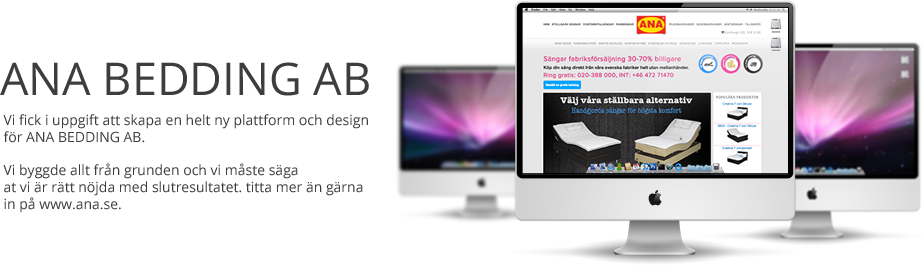
<style>
.page{position:relative;width:924px;height:265px;background:#ffffff}
.page>*{position:absolute;margin:0}
.t1{font:45px "OpenSans";color:#3d3d3d}
.t2{font:14px "OpenSans";color:#3d3d3d}
</style>
<div class="page">
<p class="t1" style="left:0px;top:62px;width:369px;height:34px">ANA BEDDING AB</p>
<p class="t2" style="left:3px;top:114px;width:365px;height:99px">Vi fick i uppgift att skapa en helt ny plattform och design <br>för ANA BEDDING AB.<br><br>Vi byggde allt från grunden och vi måste säga<br>at vi är rätt nöjda med slutresultatet. titta mer än gärna<br>in på www.ana.se.</p>
</div>
